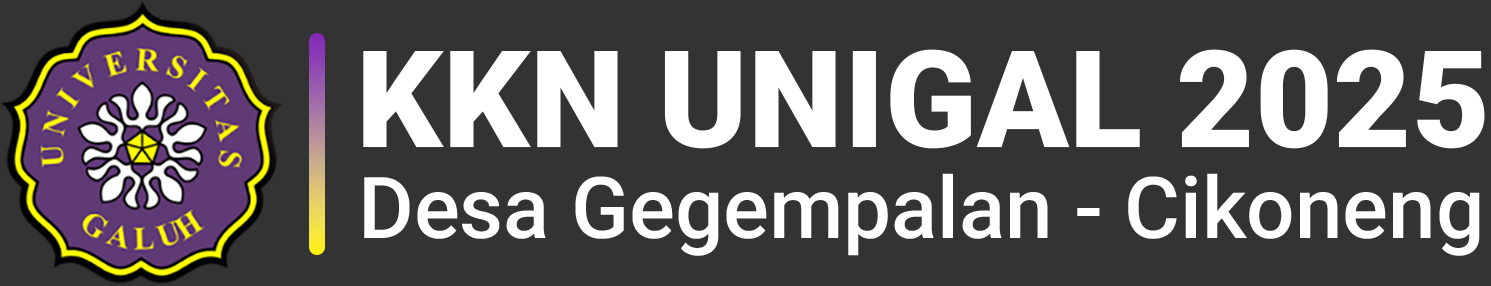
<style>
.page{position:relative;width:1491px;height:286px;background:#333333}
.page>*{position:absolute;margin:0}
.t1{font:135.4px "Roboto-Black";color:#ffffff}
.t2{font:85.4px "Roboto-Medium";color:#ffffff}
</style>
<div class="page">
<p class="t1" style="left:363px;top:49px;width:1122px;height:100px">KKN UNIGAL 2025</p>
<p class="t2" style="left:364px;top:173px;width:1116px;height:83px">Desa Gegempalan - Cikoneng</p>
</div>
